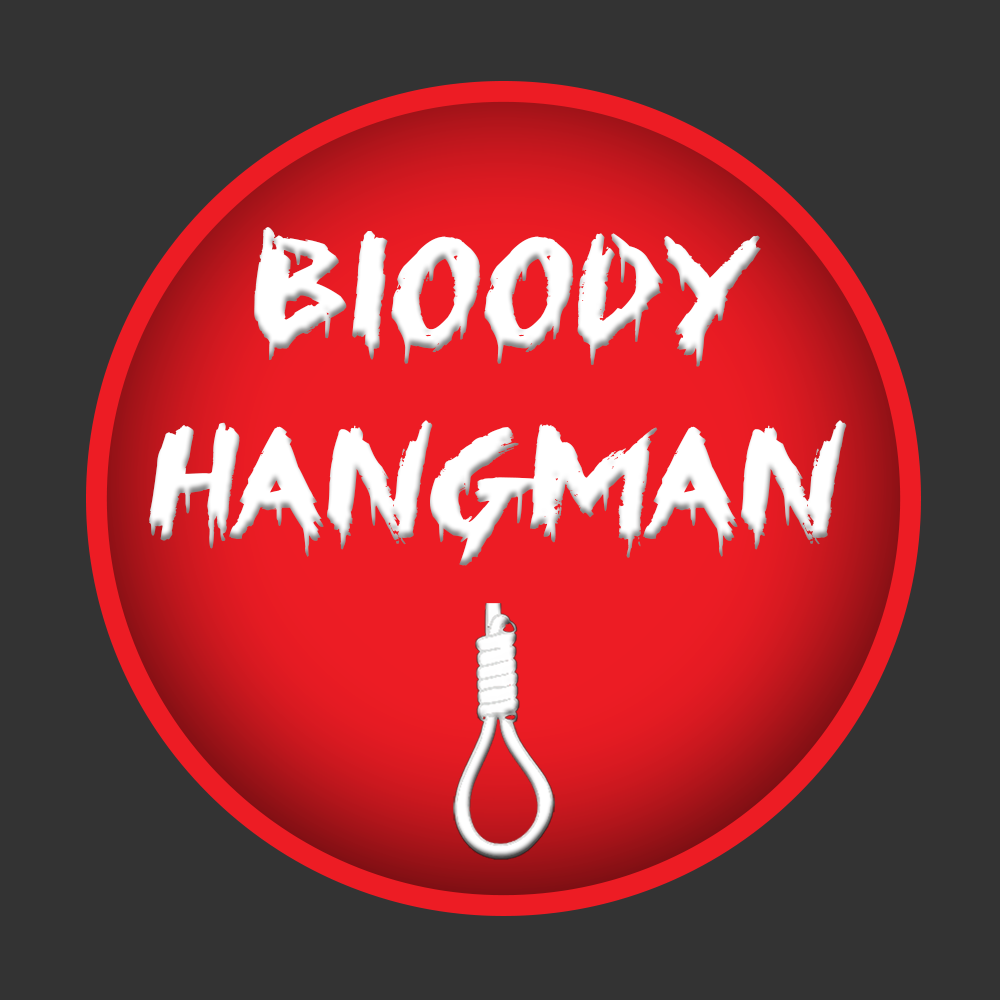
<style>
.page{position:relative;width:1000px;height:1000px;background:#333333}
.page>*{position:absolute;margin:0}
.t1{font:158.3px "Something-Strange";color:#ffffff;scale:1.3 1}
</style>
<div class="page">
<p class="t1" style="left:149px;top:227px;width:698px;height:339px">Bloody <br>HangMan</p>
</div>
